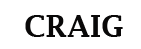
<style>
.page{position:relative;width:141px;height:49px;background:#ffffff}
.page>*{position:absolute;margin:0}
.t1{font:30px "LucidaFax-Demi";color:#090808}
</style>
<div class="page">
<p class="t1" style="left:25px;top:15px;width:98px;height:22px">CRAIG</p>
</div>
